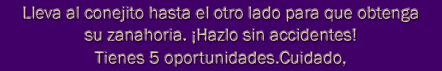
<style>
.page{position:relative;width:442px;height:71px;background:#400068}
.page>*{position:absolute;margin:0}
.t1{font:18px/22.2px "FranklinGothic-Book";color:#d4c088}
</style>
<div class="page">
<p class="t1" style="left:24px;top:7px;width:395px;height:60px;text-align:center">Lleva al conejito hasta el otro lado para que obtenga<br>su zanahoria. ¡Hazlo sin accidentes!<br>Tienes 5 oportunidades.Cuidado,</p>
</div>
